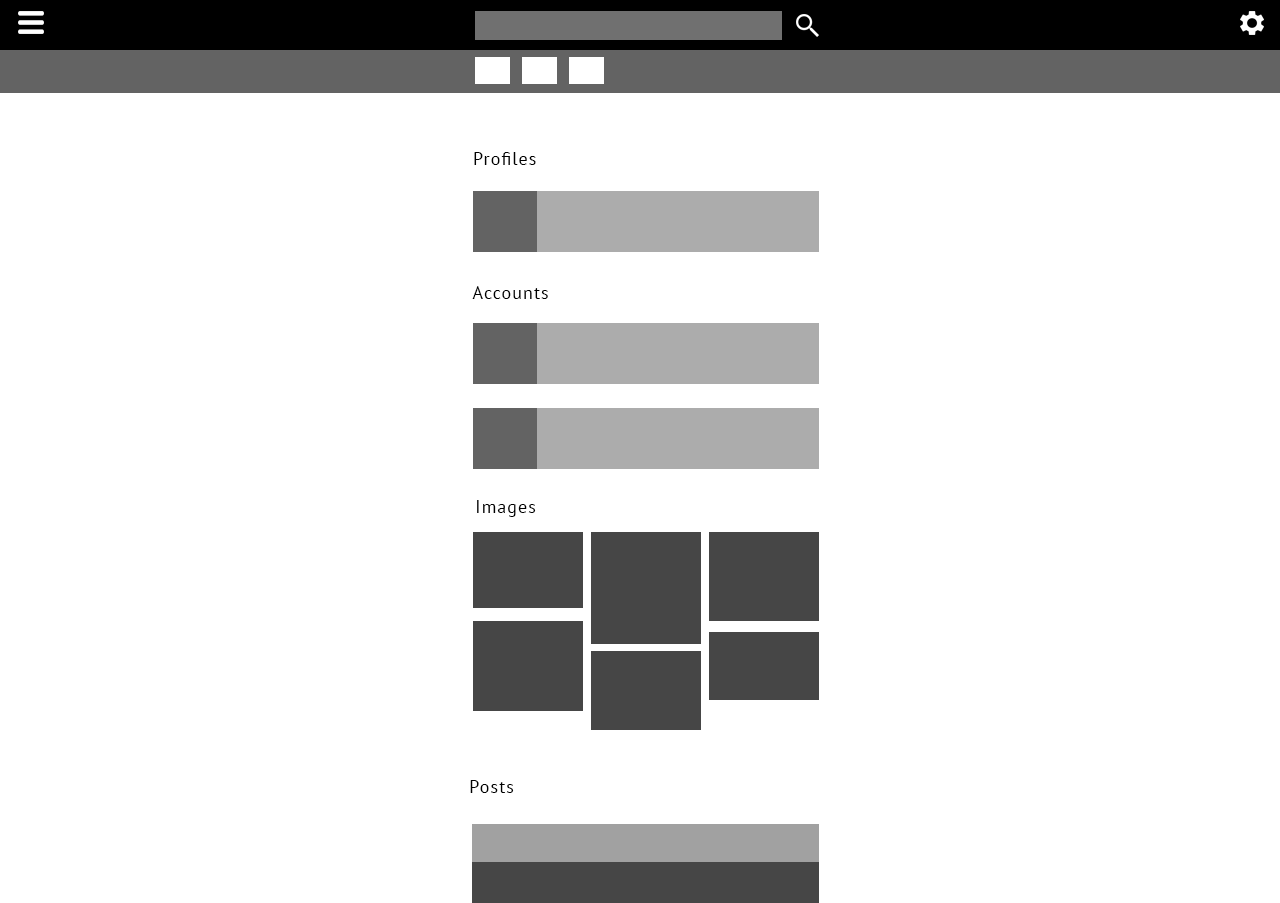
<style>
.page{position:relative;width:1280px;height:903px;background:#ffffff}
.page>*{position:absolute;margin:0}
.t1{font:18.1px "PTSans-Regular";letter-spacing:0.06em;color:#000000}
.t2{font:18px "PTSans-Regular";letter-spacing:0.06em;color:#000000}
</style>
<div class="page">
<p class="t1" style="left:474px;top:152px;width:62px;height:13px">Profiles</p>
<p class="t1" style="left:472px;top:286px;width:76px;height:13px">Accounts</p>
<p class="t2" style="left:477px;top:500px;width:59px;height:17px">Images</p>
<p class="t2" style="left:470px;top:780px;width:44px;height:13px">Posts</p>
</div>
